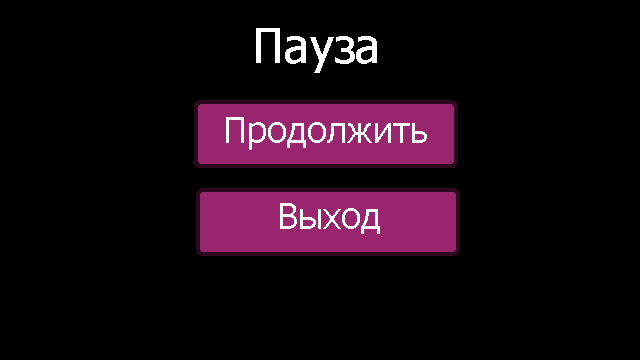
<style>
.page{position:relative;width:640px;height:360px;background:#000000}
.page>*{position:absolute;margin:0}
.t1{font:48px "Tahoma";color:#ffffff}
.t2{font:36px "Tahoma";color:#ffffff}
</style>
<div class="page">
<p class="t1" style="left:256px;top:28px;width:121px;height:45px">Пауза</p>
<p class="t2" style="left:226px;top:117px;width:201px;height:33px">Продолжить</p>
<p class="t2" style="left:280px;top:203px;width:100px;height:31px">Выход</p>
</div>
